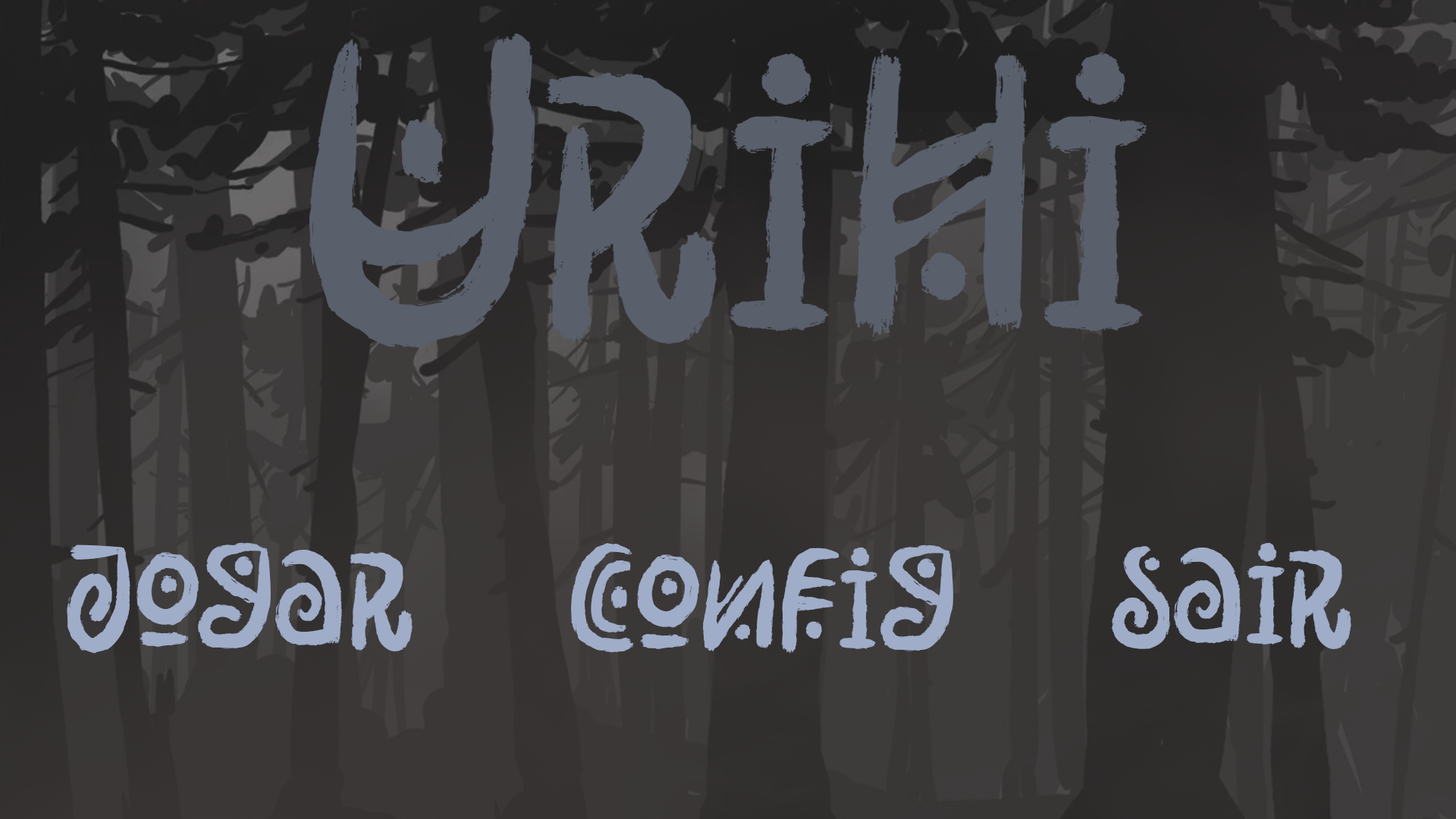
<style>
.page{position:relative;width:1456px;height:819px}
.page>*{position:absolute;margin:0}
.t1{font:128.9px "RimbaAndalas";color:#9fadc8}
</style>
<div class="page">
<p class="t1" style="left:67px;top:542px;width:346px;height:112px">Jogar</p>
<p class="t1" style="left:571px;top:543px;width:382px;height:111px">Config</p>
<p class="t1" style="left:1112px;top:542px;width:239px;height:107px">sair</p>
</div>
